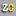
<style>
.page{position:relative;width:16px;height:16px;background:#aaaaaa}
.page>*{position:absolute;margin:0}
.t1{font:10px "SpecialElite-Regular";color:#ffffff;text-transform:uppercase}
.t2{font:10px "SpecialElite-Regular";color:#fbe446;text-transform:uppercase}
</style>
<div class="page">
<p class="t1" style="left:2px;top:3px;width:12px;height:9px">Z<span class="t2">C</span></p>
</div>
